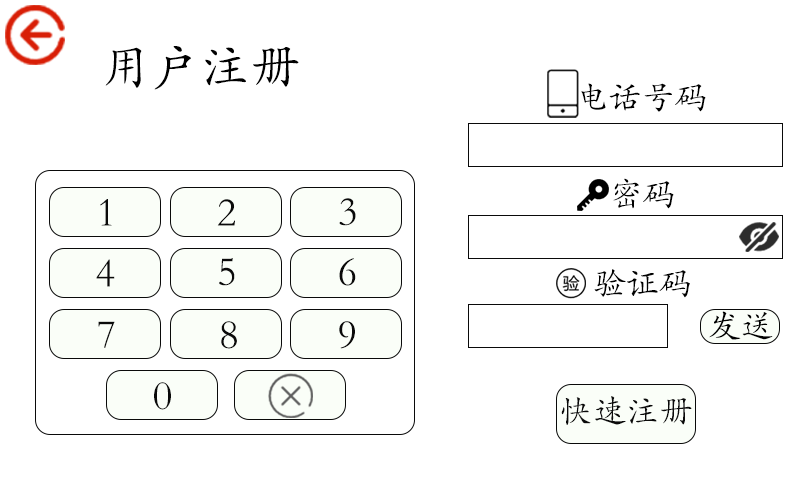
<style>
.page{position:relative;width:800px;height:480px;background:#ffffff}
.page>*{position:absolute;margin:0}
.t1{font:50px "STKaiti";color:#000000}
.t2{font:33.3px "STKaiti";color:#000000}
.t3{font:41.7px "STKaiti";color:#0a0a0a}
.t4{font:33.3px "STKaiti";color:#0a0a0a}
</style>
<div class="page">
<p class="t1" style="left:105px;top:46px;width:194px;height:44px">用户注册</p>
<p class="t2" style="left:581px;top:83px;width:125px;height:29px">电话号码</p>
<p class="t2" style="left:613px;top:178px;width:61px;height:31px">密码</p>
<p class="t3" style="left:339px;top:198px;width:17px;height:28px">3</p>
<p class="t3" style="left:100px;top:199px;width:12px;height:27px">1</p>
<p class="t3" style="left:217px;top:199px;width:18px;height:27px">2</p>
<p class="t3" style="left:96px;top:259px;width:19px;height:28px">4</p>
<p class="t3" style="left:219px;top:258px;width:16px;height:28px">5</p>
<p class="t3" style="left:339px;top:258px;width:17px;height:28px">6</p>
<p class="t2" style="left:594px;top:269px;width:96px;height:29px">验证码</p>
<p class="t2" style="left:709px;top:311px;width:64px;height:29px">发送</p>
<p class="t3" style="left:98px;top:321px;width:17px;height:27px">7</p>
<p class="t3" style="left:221px;top:321px;width:16px;height:28px">8</p>
<p class="t3" style="left:339px;top:321px;width:16px;height:28px">9</p>
<p class="t3" style="left:154px;top:382px;width:17px;height:28px">0</p>
<p class="t4" style="left:561px;top:396px;width:131px;height:29px">快速注册</p>
</div>
